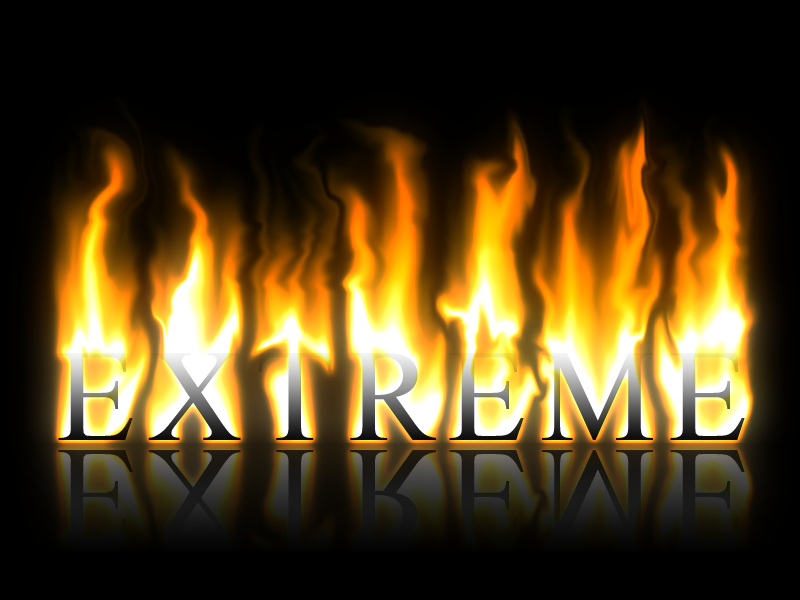
<style>
.page{position:relative;width:800px;height:600px;background:#000000}
.page>*{position:absolute;margin:0}
.t1{font:130px "TimesNewRomanPSMT";letter-spacing:0.1em;font-variant:small-caps}
</style>
<div class="page">
<p class="t1" style="left:58px;top:353px;width:687px;height:87px">EXTREME</p>
</div>
